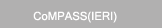
<style>
.page{position:relative;width:162px;height:28px;background:#b1b0b0}
.page>*{position:absolute;margin:0}
.t1{font:18px "Kartika";color:#ffffff}
</style>
<div class="page">
<p class="t1" style="left:33px;top:11px;width:84px;height:12px">CoMPASS(IERI)</p>
</div>
